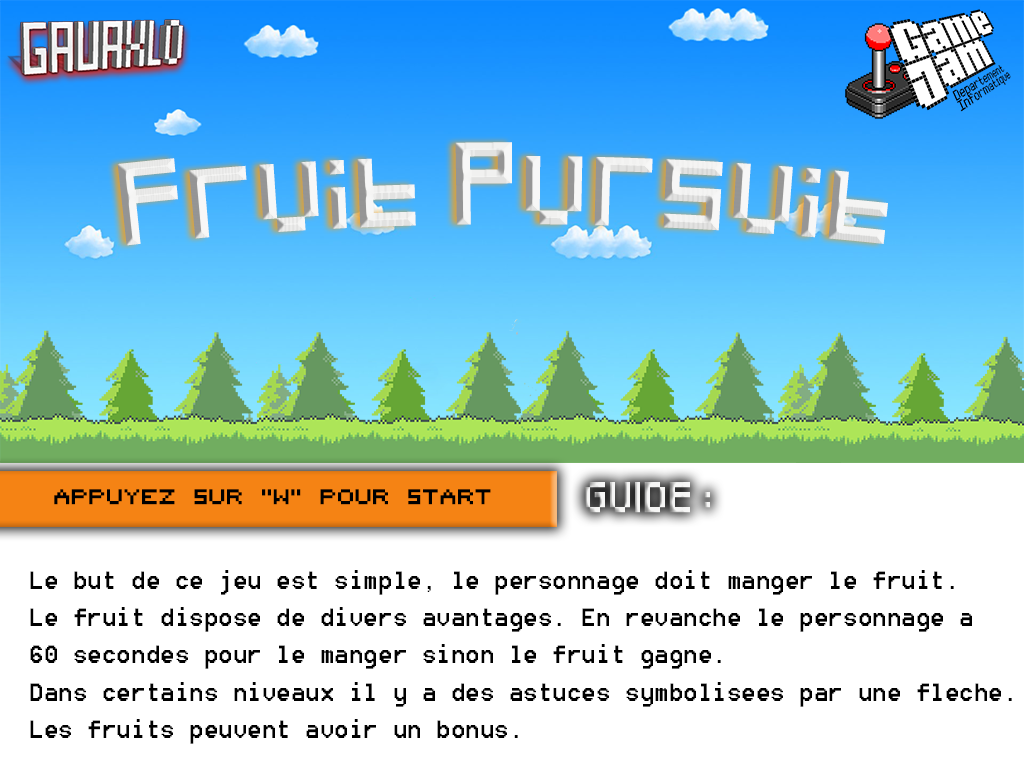
<style>
.page{position:relative;width:1024px;height:768px;background:#ffffff}
.page>*{position:absolute;margin:0}
.t1{font:68px "Pixeled";color:#f4f4f3}
.t2{font:25px "Pixeled";color:#f4f4f3}
.t3{font:23.6px "8_bit_1_6";color:#000000}
.t4{font:14.9px "Pixeled";color:#000000}
.t5{font:31px "8514oem";color:#000000}
</style>
<div class="page">
<p class="t1" style="left:117px;top:142px;width:771px;height:104px">Fruit Pursuit</p>
<p class="t2" style="left:585px;top:482px;width:125px;height:31px">GUIDE :</p>
<p class="t3" style="left:54px;top:489px;width:437px;height:16px">Appuyez <span class="t4">s</span>ur "w" pour <span class="t4">s</span>tart</p>
<p class="t5" style="left:30px;top:570px;width:982px;height:174px">Le but de ce jeu est simple, le personnage doit manger le fruit. <br>Le fruit dispose de divers avantages. En revanche le personnage a <br>60 secondes pour le manger sinon le fruit gagne.<br>Dans certains niveaux il y a des astuces symbolisees par une fleche.<br>Les fruits peuvent avoir un bonus.</p>
</div>
